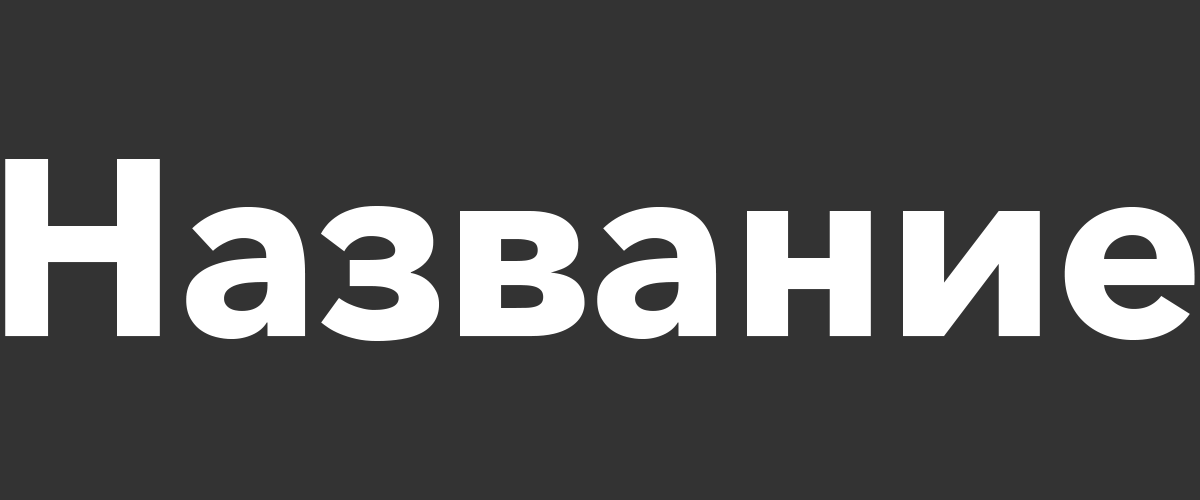
<style>
.page{position:relative;width:1200px;height:500px;background:#333333}
.page>*{position:absolute;margin:0}
.t1{font:250px "AvenirNext-Bold";color:#ffffff}
</style>
<div class="page">
<p class="t1" style="left:5px;top:159px;width:1190px;height:182px">Название</p>
</div>
